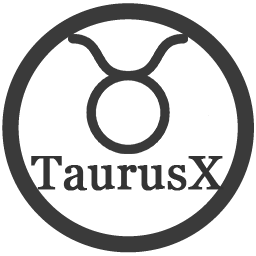
<style>
.page{position:relative;width:256px;height:256px;background:#ffffff}
.page>*{position:absolute;margin:0}
.t1{font:48px "Georgia";color:#333333;font-weight:bold}
</style>
<div class="page">
<p class="t1" style="left:31px;top:156px;width:193px;height:35px">TaurusX</p>
</div>
